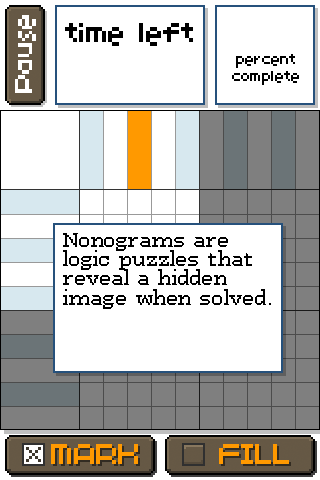
<style>
.page{position:relative;width:320px;height:480px;background:#ffffff}
.page>*{position:absolute;margin:0}
.t1{font:27px "7px4bus";letter-spacing:-0.05em;color:#000000}
.t2{font:14px "7px4bus";letter-spacing:-0.05em;color:#000000}
.t3{font:16px "PFWestaSeven";color:#000000}
</style>
<div class="page">
<p class="t1" style="left:65px;top:23px;width:128px;height:23px">time left</p>
<p class="t2" style="left:232px;top:54px;width:67px;height:31px;text-align:center">percent<br>complete</p>
<p class="t3" style="left:63px;top:233px;width:208px;height:76px">Nonograms are logic puzzles that reveal a hidden image when solved.</p>
</div>
